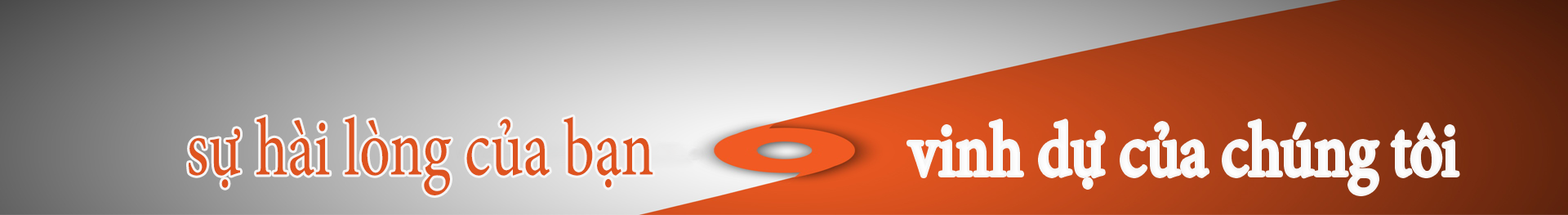
<style>
.page{position:relative;width:1568px;height:215px}
.page>*{position:absolute;margin:0}
.t1{font:80.8px "MinionPro-Regular";color:#e0541f;scale:0.75 1}
.t2{font:75.2px "MinionPro-Regular";color:#ffffff;scale:0.84 1}
</style>
<div class="page">
<p class="t1" style="left:189px;top:116px;width:464px;height:79px">sự hài lòng của bạn</p>
<p class="t2" style="left:909px;top:121px;width:549px;height:73px">vinh dự của chúng tôi</p>
</div>
